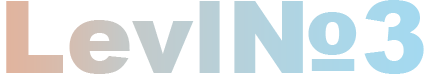
<style>
.page{position:relative;width:428px;height:74px;background:#ffffff}
.page>*{position:absolute;margin:0}
.t1{font:100px "Arial-Black"}
</style>
<div class="page">
<p class="t1" style="left:6px;top:0px;width:418px;height:74px">Levl№3</p>
</div>
